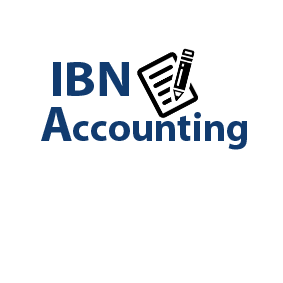
<style>
.page{position:relative;width:283px;height:283px;background:#ffffff}
.page>*{position:absolute;margin:0}
.t1{font:50px "Myriad-Bold";color:#113b6f;scale:1.05 1}
.t2{font:40px "Myriad-Bold";color:#113b6f}
.t3{font:50px "Myriad-Bold";color:#113b6f}
</style>
<div class="page">
<p class="t1" style="left:53px;top:62px;width:76px;height:34px">IBN</p>
<p class="t2" style="left:41px;top:107px;width:206px;height:43px"><span class="t3">A</span>ccounting</p>
</div>
